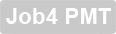
<style>
.page{position:relative;width:116px;height:34px;background:#c9c9c9}
.page>*{position:absolute;margin:0}
.t1{font:22.1px "Arial-BoldMT";color:#ffffff}
</style>
<div class="page">
<p class="t1" style="left:6px;top:8px;width:105px;height:16px">Job4 PMT</p>
</div>
